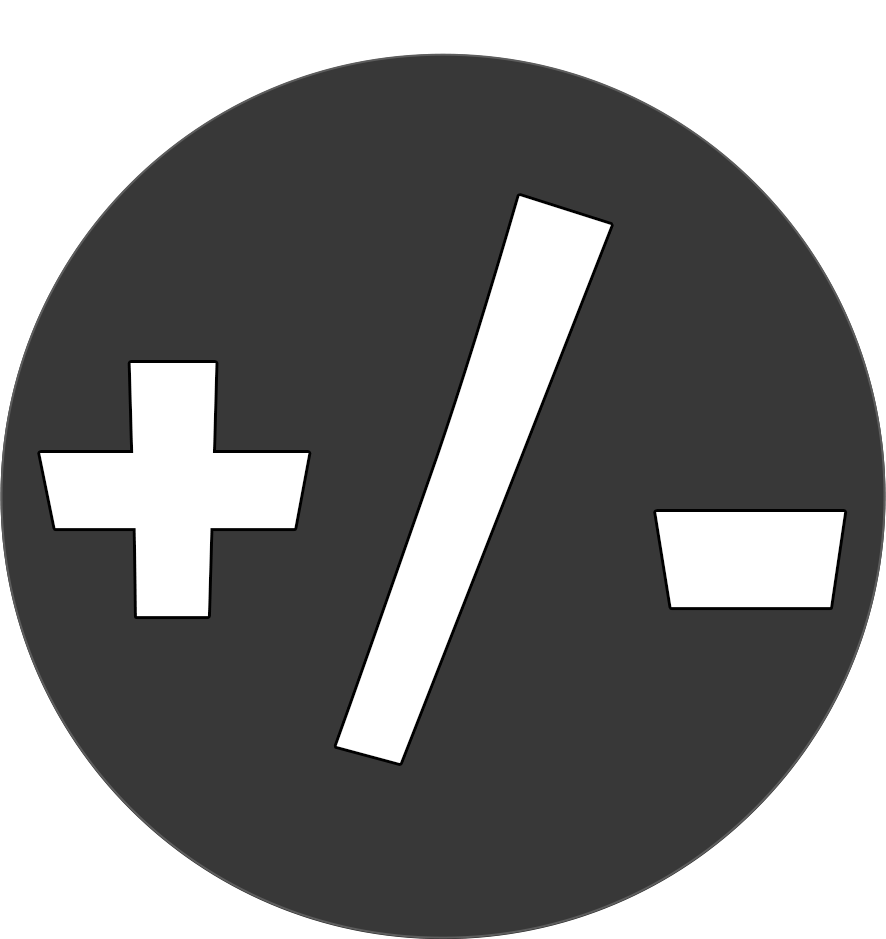
<style>
.page{position:relative;width:886px;height:939px;background:#383838}
.page>*{position:absolute;margin:0}
.t1{font:637.2px "ShowcardGothic-Reg";color:#ffffff}
</style>
<div class="page">
<p class="t1" style="left:40px;top:196px;width:805px;height:567px">+/-</p>
</div>
